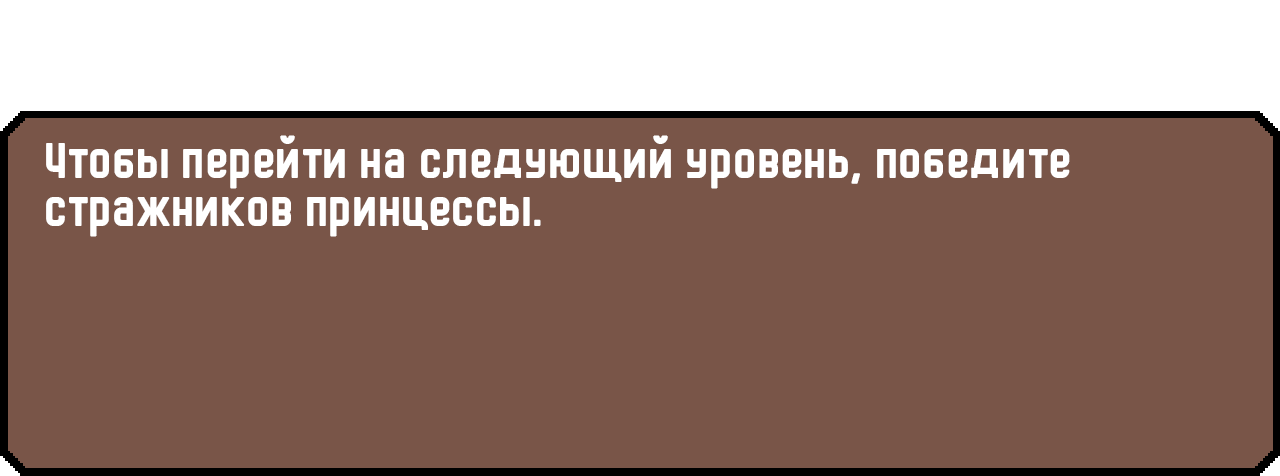
<style>
.page{position:relative;width:1280px;height:476px;background:#795548}
.page>*{position:absolute;margin:0}
.t1{font:48px/48px "HermanoMayor";color:#ffffff}
</style>
<div class="page">
<p class="t1" style="left:46px;top:135px;width:1024px;height:102px">Чтобы перейти на следующий уровень, победите стражников принцессы.</p>
</div>
